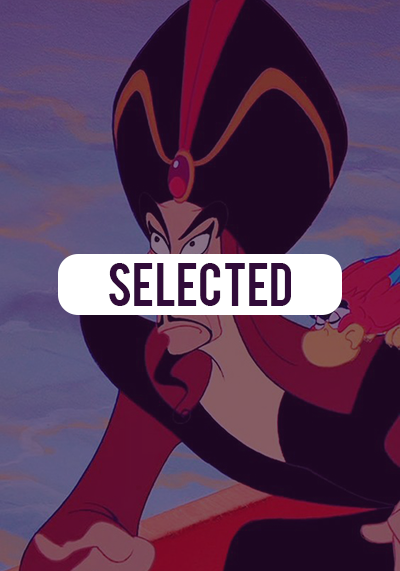
<style>
.page{position:relative;width:400px;height:571px}
.page>*{position:absolute;margin:0}
.t1{font:48px "Bebas";color:#310b39}
</style>
<div class="page">
<p class="t1" style="left:109px;top:263px;width:182px;height:43px">SELECTED</p>
</div>
